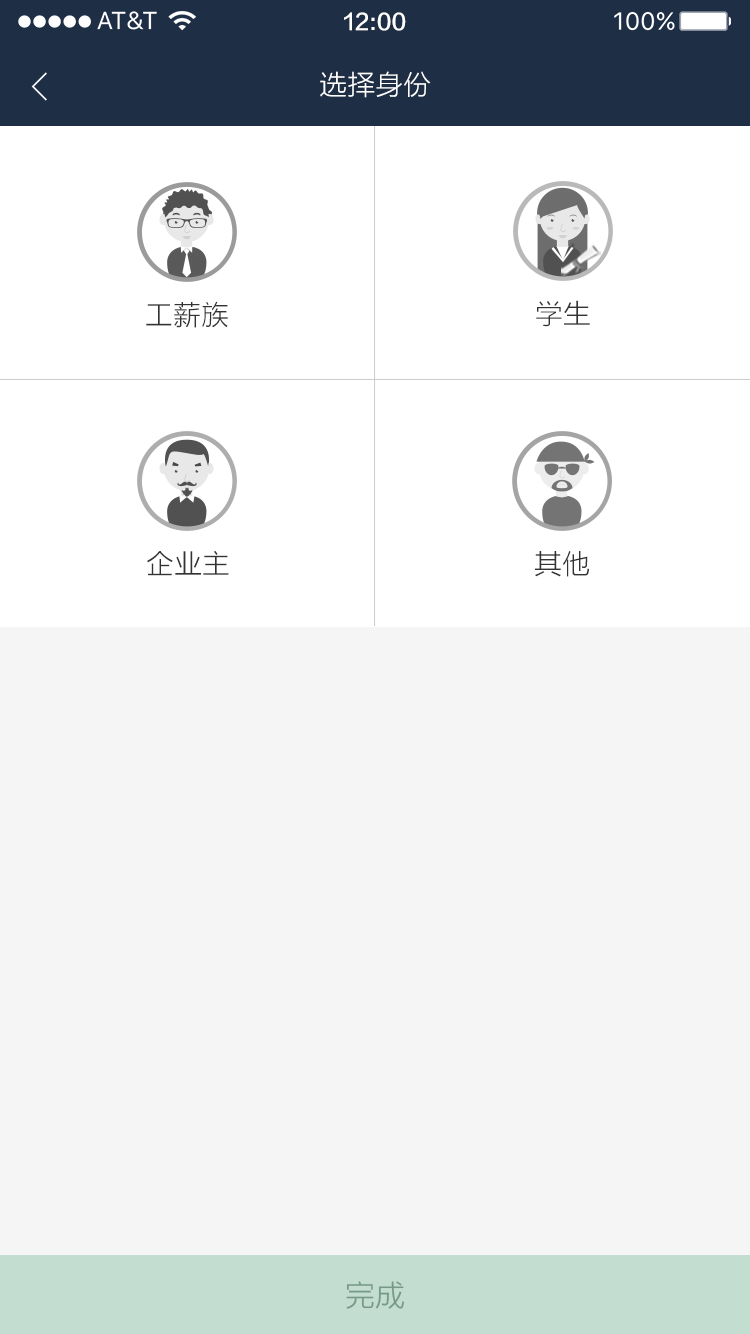
<style>
.page{position:relative;width:750px;height:1334px;background:#f5f5f5}
.page>*{position:absolute;margin:0}
.t1{font:22px "FZLTZHK--GBK1-0";color:#ffffff}
.t2{font:28px "FZLTXHK";color:#ffffff}
.t3{font:28px "FZLTXHK";color:#333333}
.t4{font:30px "FZLTXHK";color:#769988}
</style>
<div class="page">
<p class="t1" style="left:344px;top:12px;width:62px;height:19px">12:00</p>
<p class="t2" style="left:320px;top:71px;width:111px;height:27px">选择身份</p>
<p class="t3" style="left:146px;top:301px;width:82px;height:27px">工薪族</p>
<p class="t3" style="left:536px;top:300px;width:54px;height:27px">学生</p>
<p class="t3" style="left:147px;top:550px;width:82px;height:26px">企业主</p>
<p class="t3" style="left:535px;top:551px;width:54px;height:26px">其他</p>
<p class="t4" style="left:346px;top:1281px;width:59px;height:28px">完成</p>
</div>
